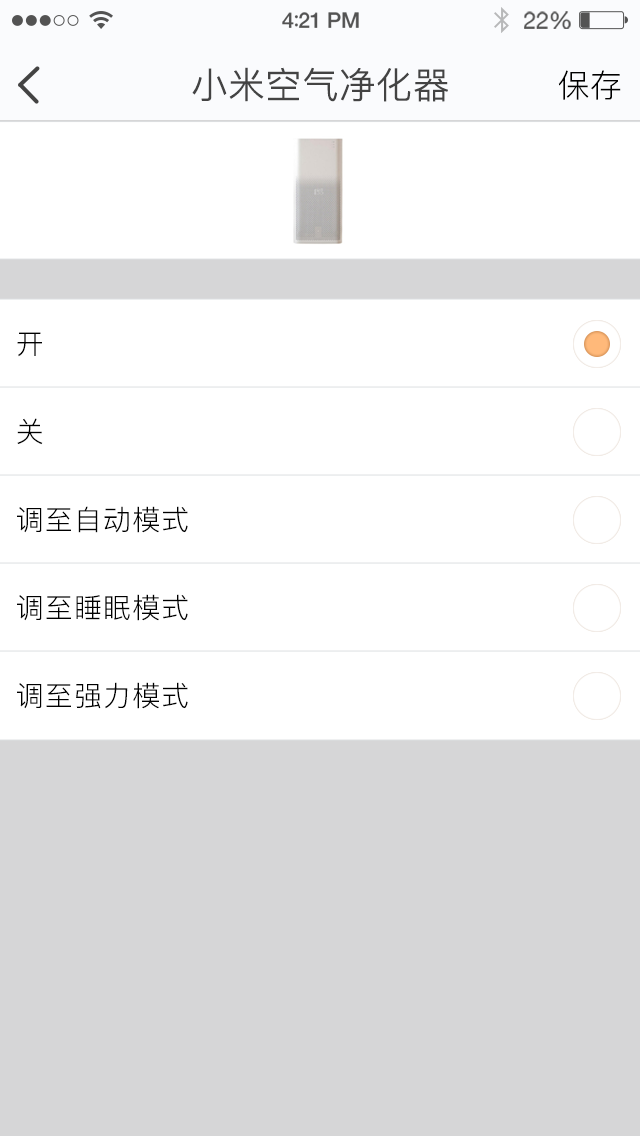
<style>
.page{position:relative;width:640px;height:1136px;background:#ffffff}
.page>*{position:absolute;margin:0}
.t1{font:36px "PingFang-SC-Regular";color:#434343;font-weight:bold}
.t2{font:32px "PingFang-SC-Regular";color:#000000}
.t3{font:28px "PingFang-SC-Regular";letter-spacing:0.04em;color:#000000}
</style>
<div class="page">
<p class="t1" style="left:192px;top:67px;width:256px;height:35px">小米空气净化器</p>
<p class="t2" style="left:558px;top:70px;width:63px;height:30px">保存</p>
<p class="t3" style="left:17px;top:332px;width:25px;height:25px">开</p>
<p class="t3" style="left:17px;top:418px;width:26px;height:27px">关</p>
<p class="t3" style="left:17px;top:506px;width:171px;height:27px">调至自动模式</p>
<p class="t3" style="left:17px;top:594px;width:171px;height:27px">调至睡眠模式</p>
<p class="t3" style="left:17px;top:682px;width:171px;height:27px">调至强力模式</p>
</div>
